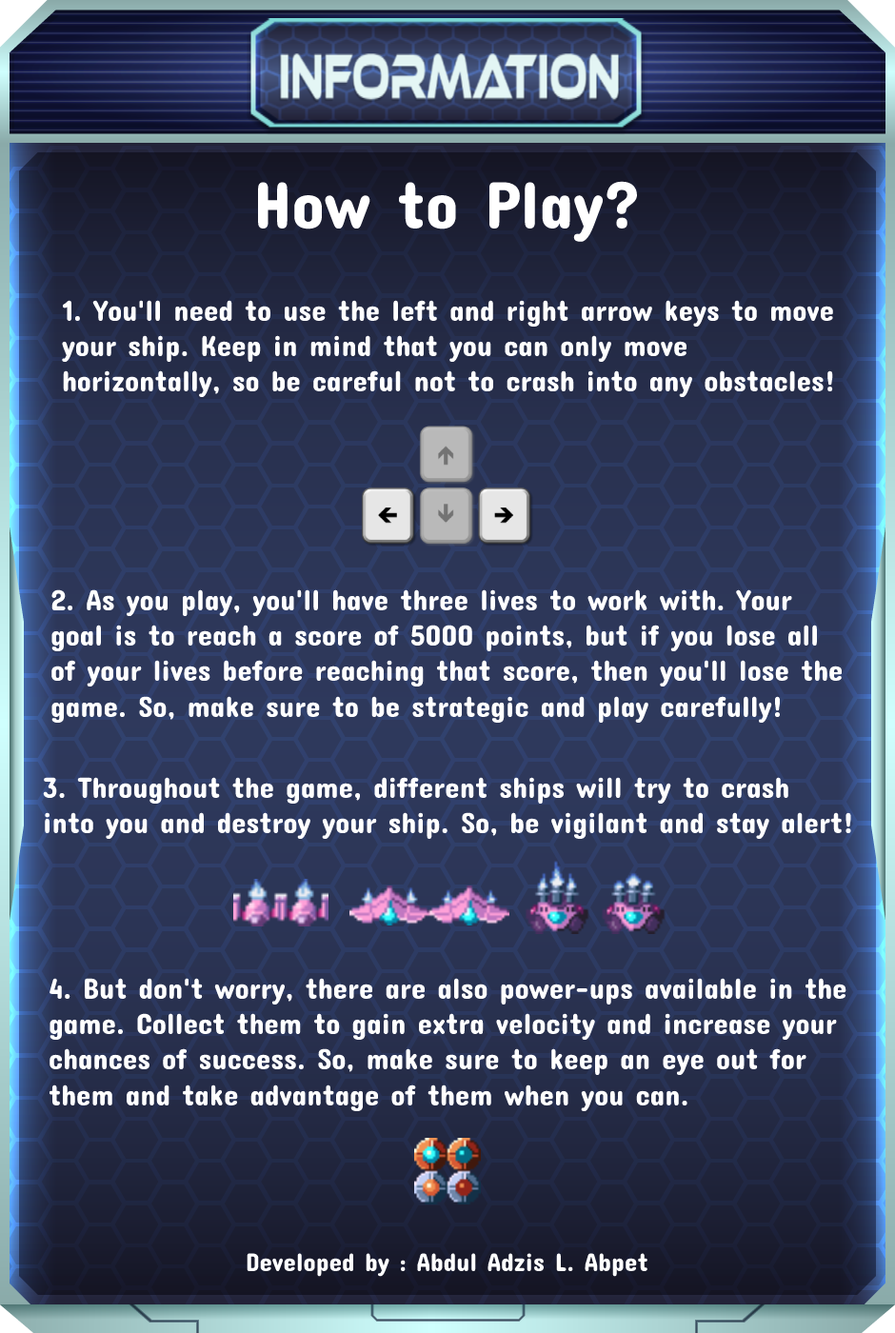
<style>
.page{position:relative;width:895px;height:1333px}
.page>*{position:absolute;margin:0}
.t1{font:67.6px "ConcertOne-Regular";color:#ffffff}
.t2{font:29.5px "ConcertOne-Regular";color:#ffffff}
.t3{font:25.7px "ConcertOne-Regular";color:#ffffff}
</style>
<div class="page">
<p class="t1" style="left:258px;top:181px;width:379px;height:61px">How to Play?</p>
<p class="t2" style="left:62px;top:300px;width:771px;height:98px">1. You'll need to use the left and right arrow keys to move <br>your ship. Keep in mind that you can only move <br>horizontally, so be careful not to crash into any obstacles!</p>
<p class="t2" style="left:51px;top:589px;width:791px;height:134px">2. As you play, you'll have three lives to work with. Your <br>goal is to reach a score of 5000 points, but if you lose all <br>of your lives before reaching that score, then you'll lose the<br>game. So, make sure to be strategic and play carefully!</p>
<p class="t2" style="left:43px;top:777px;width:808px;height:63px">3. Throughout the game, different ships will try to crash <br>into you and destroy your ship. So, be vigilant and stay alert!</p>
<p class="t2" style="left:49px;top:978px;width:797px;height:134px">4. But don't worry, there are also power-ups available in the <br>game. Collect them to gain extra velocity and increase your <br>chances of success. So, make sure to keep an eye out for <br>them and take advantage of them when you can.</p>
<p class="t3" style="left:247px;top:1253px;width:400px;height:23px">Developed by : Abdul Adzis L. Abpet</p>
</div>
